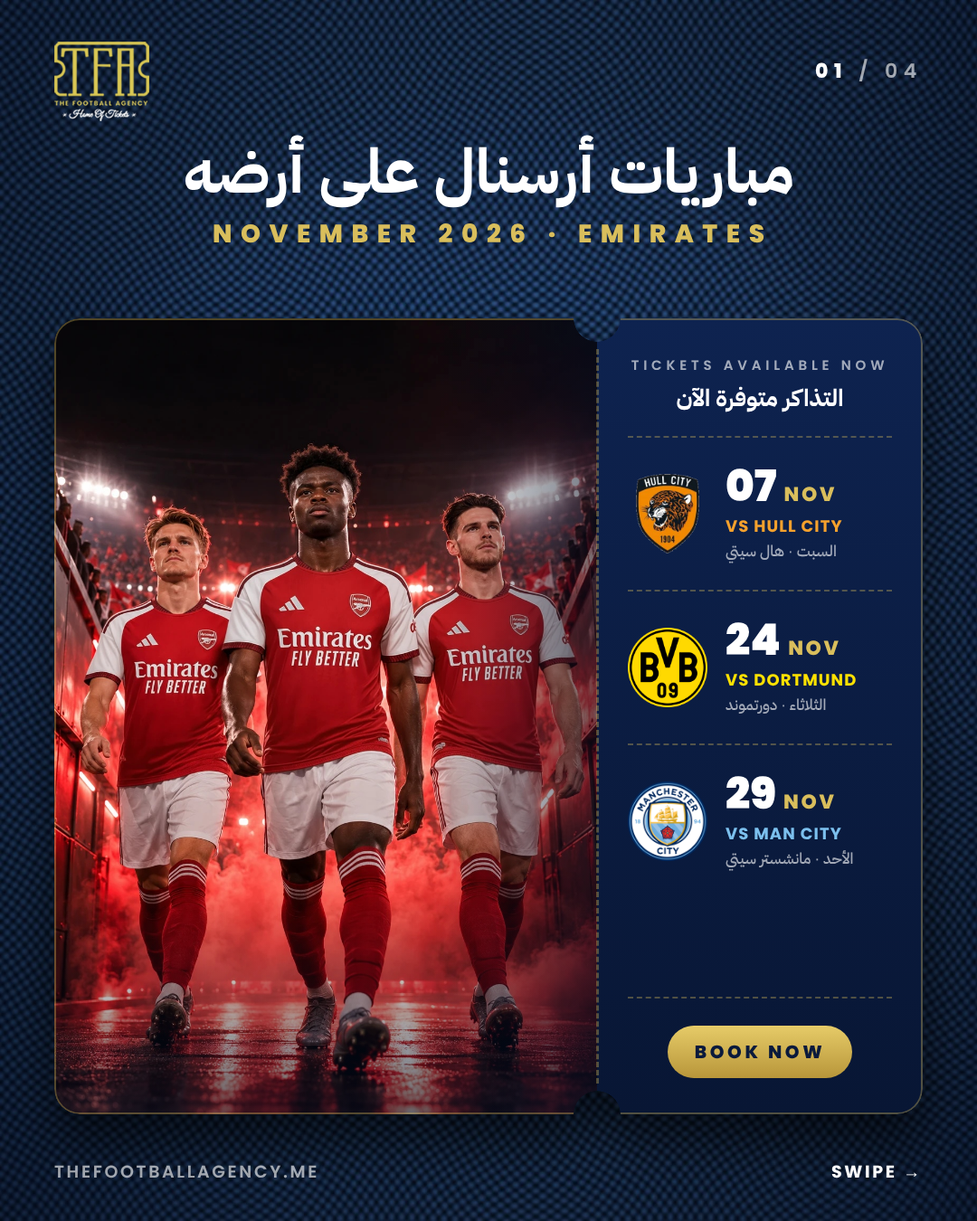
<style>
.page{position:relative;width:977px;height:1221px}
.page>*{position:absolute;margin:0}
.t1{font:19.9px "Poppins-SemiBold";letter-spacing:0.3em;color:#ffffff}
.t2{font:19.9px "Poppins-ExtraBold";letter-spacing:0.3em;color:#ffffff}
.t3{font:61.5px "IBMPlexSansArabic-Bold";color:#ffffff}
.t4{font:25.3px "Poppins-ExtraBold";letter-spacing:0.34em;color:#d9be5c}
.t5{font:13.6px "Poppins-SemiBold";letter-spacing:0.32em}
.t6{font:23.5px "IBMPlexSansArabic-Bold";color:#ffffff}
.t7{font:19.9px/43.4px "Poppins-ExtraBold";letter-spacing:0.12em;color:#d9be5c}
.t8{font:43.4px/43.4px "Poppins-Black";color:#ffffff}
.t9{font:16.3px "Poppins-Bold";letter-spacing:0.06em;color:#f5a12d}
.t10{font:15.4px "IBMPlexSansArabic-Medium"}
.t11{font:16.3px "Poppins-Bold";letter-spacing:0.06em;color:#fde100}
.t12{font:16.3px "Poppins-Bold";letter-spacing:0.06em;color:#7cc0ee}
.t13{font:18.1px "Poppins-ExtraBold";letter-spacing:0.18em;color:#0a1a3c}
.t14{font:17.2px "Poppins-SemiBold";letter-spacing:0.14em}
.t15{font:17.2px "Poppins-Bold";letter-spacing:0.14em;color:#ffffff}
</style>
<div class="page">
<p class="t1" style="left:815px;top:59px;width:101px;height:22px"><span class="t2">01</span> / 04</p>
<p class="t3" style="left:185px;top:135px;width:607px;height:73px">مباريات أرسنال على أرضه</p>
<p class="t4" style="left:213px;top:223px;width:551px;height:20px">NOVEMBER 2026 · EMIRATES</p>
<p class="t5" style="left:631px;top:360px;width:253px;height:10px">TICKETS AVAILABLE NOW</p>
<p class="t6" style="left:676px;top:386px;width:166px;height:26px">التذاكر متوفرة الآن</p>
<p class="t7" style="left:726px;top:468px;width:109px;height:34px"><span class="t8">07</span><br>NOV</p>
<p class="t9" style="left:725px;top:520px;width:117px;height:13px">VS HULL CITY</p>
<p class="t10" style="left:725px;top:544px;width:111px;height:19px">السبت · هال سيتي</p>
<p class="t7" style="left:726px;top:622px;width:112px;height:34px"><span class="t8">24</span><br>NOV</p>
<p class="t11" style="left:725px;top:674px;width:131px;height:12px">VS DORTMUND</p>
<p class="t10" style="left:725px;top:698px;width:101px;height:16px">الثلاثاء · دورتموند</p>
<p class="t7" style="left:726px;top:776px;width:108px;height:33px"><span class="t8">29</span><br>NOV</p>
<p class="t12" style="left:725px;top:827px;width:116px;height:13px">VS MAN CITY</p>
<p class="t10" style="left:725px;top:850px;width:128px;height:21px">الأحد · مانشستر سيتي</p>
<p class="t13" style="left:695px;top:1045px;width:127px;height:14px">BOOK NOW</p>
<p class="t14" style="left:54px;top:1165px;width:263px;height:13px">THEFOOTBALLAGENCY.ME</p>
<p class="t15" style="left:831px;top:1165px;width:86px;height:13px">SWIPE →</p>
</div>
